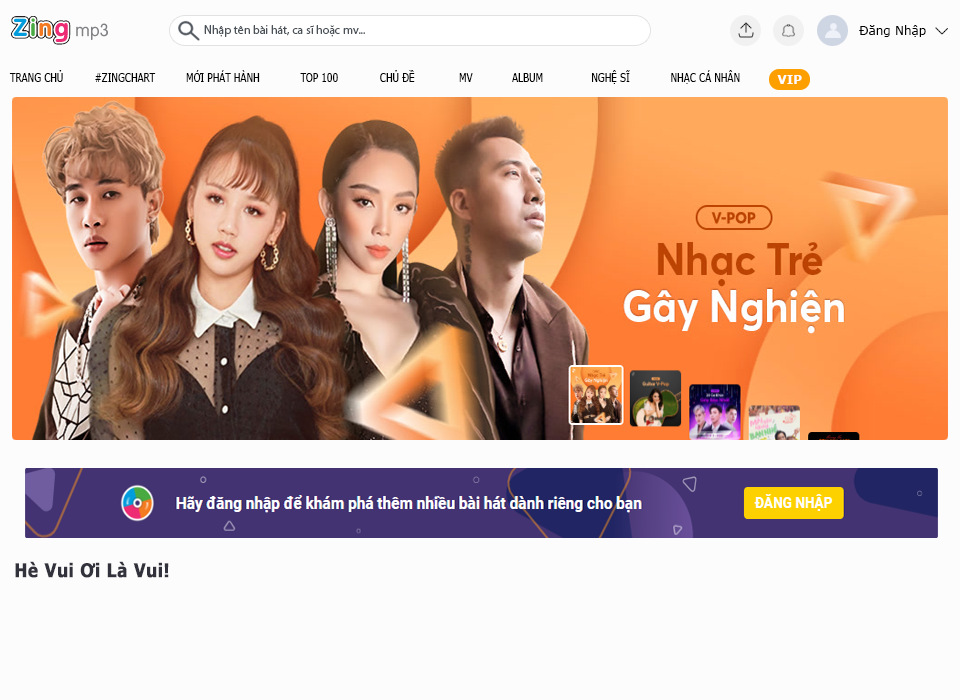
<style>
.page{position:relative;width:960px;height:700px;background:#fcfcfc}
.page>*{position:absolute;margin:0}
.t1{font:12px "MyriadPro-Regular";color:#4b5259}
.t2{font:12px "Verdana";color:#000000}
.t3{font:12px "Verdana";color:#000000;text-transform:uppercase;scale:0.74 1}
.t4{font:12px "Verdana-Bold";color:#ffffff;text-transform:uppercase}
.t5{font:18.9px "Verdana-Bold";color:#32323d;font-weight:bold;scale:0.83 1}
</style>
<div class="page">
<p class="t1" style="left:204px;top:25px;width:161px;height:12px">Nhập tên bài hát, ca sĩ hoặc mv...</p>
<p class="t2" style="left:859px;top:25px;width:67px;height:12px">Đăng Nhập</p>
<p class="t3" style="left:9px;top:70px;width:731px;height:14px">TRANG CHỦ          #ZINGCHART          MỚI PHÁT HÀNH  TOP 100  CHỦ ĐỀ  MV  ALBUM  NGHỆ SĨ  NHẠC CÁ NHÂN</p>
<p class="t4" style="left:777px;top:75px;width:25px;height:9px">vip</p>
<p class="t5" style="left:15px;top:561px;width:154px;height:17px">Hè Vui Ơi Là Vui!</p>
</div>
